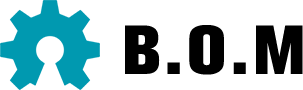
<style>
.page{position:relative;width:303px;height:90px;background:#ffffff}
.page>*{position:absolute;margin:0}
.t1{font:68.1px "AkzidenzGroteskBQ-XBold";letter-spacing:0.079em;color:#000000}
</style>
<div class="page">
<p class="t1" style="left:125px;top:25px;width:178px;height:50px">B.O.M</p>
</div>
